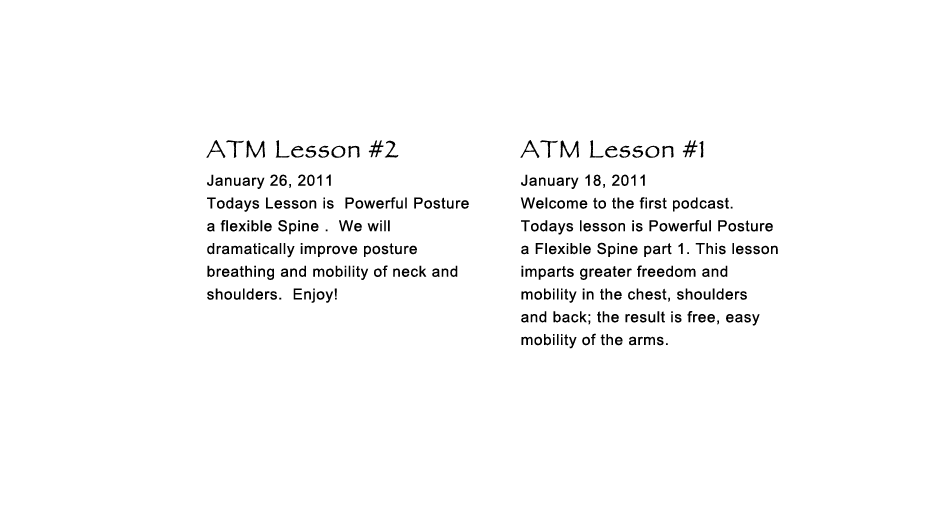
<style>
.page{position:relative;width:950px;height:523px;background:#ffffff}
.page>*{position:absolute;margin:0}
.t1{font:26.1px/22.8px "ArialMT";letter-spacing:0.04em;color:#000000}
.t2{font:43.3px/22.8px "Papyrus";letter-spacing:0.04em;color:#000000}
</style>
<div class="page">
<p class="t1" style="left:206px;top:140px;width:263px;height:163px"><span class="t2">ATM Lesson #2<br></span>January 26, 2011<br>Todays Lesson is  Powerful Posture<br>a flexible Spine .  We will <br>dramatically improve posture <br>breathing and mobility of neck and <br>shoulders.  Enjoy!</p>
<p class="t1" style="left:520px;top:140px;width:258px;height:209px"><span class="t2">ATM Lesson #1<br></span>January 18, 2011<br>Welcome to the first podcast.  <br>Todays lesson is Powerful Posture <br>a Flexible Spine part 1. This lesson<br>imparts greater freedom and <br>mobility in the chest, shoulders <br>and back; the result is free, easy <br>mobility of the arms.</p>
</div>
